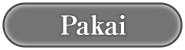
<style>
.page{position:relative;width:185px;height:50px;background:#747474}
.page>*{position:absolute;margin:0}
.t1{font:26px "RyuminPro-ExBold";letter-spacing:-0.04em;color:#ffffff}
</style>
<div class="page">
<p class="t1" style="left:60px;top:15px;width:66px;height:20px">Pakai</p>
</div>
